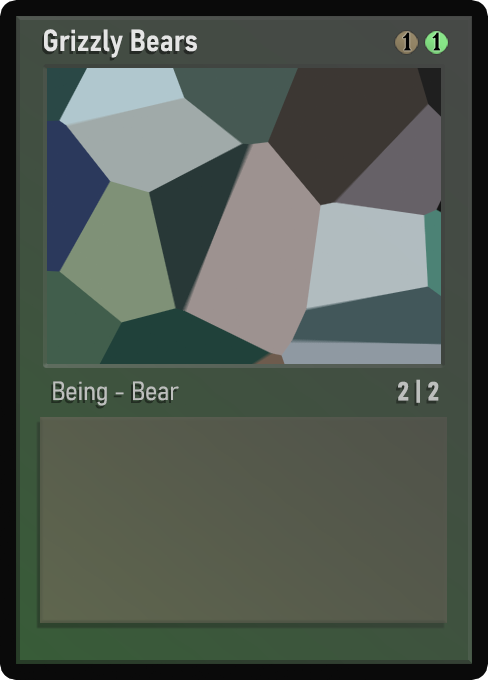
<style>
.page{position:relative;width:488px;height:680px}
.page>*{position:absolute;margin:0}
.t1{font:30px "Bahnschrift-SemiBoldSemiCondensed";color:#f2f2f2;font-weight:bold}
.t2{font:25px "WTRRoycroft";color:#000000;font-weight:bold;scale:1.09 1}
.t3{font:26px "Bahnschrift-LightSemiCondensed";color:#c8c8c8;font-weight:bold}
.t4{font:26px "Bahnschrift-BoldSemiCondensed";color:#bdbfbd;font-weight:bold}
</style>
<div class="page">
<p class="t1" style="left:44px;top:29px;width:153px;height:29px;opacity:0.9">Grizzly Bears</p>
<p class="t2" style="left:403px;top:32px;width:8px;height:19px">1</p>
<p class="t2" style="left:432px;top:32px;width:9px;height:19px">1</p>
<p class="t3" style="left:53px;top:381px;width:126px;height:25px;opacity:0.9">Being - Bear</p>
<p class="t4" style="left:398px;top:379px;width:41px;height:24px">2 | 2</p>
</div>
